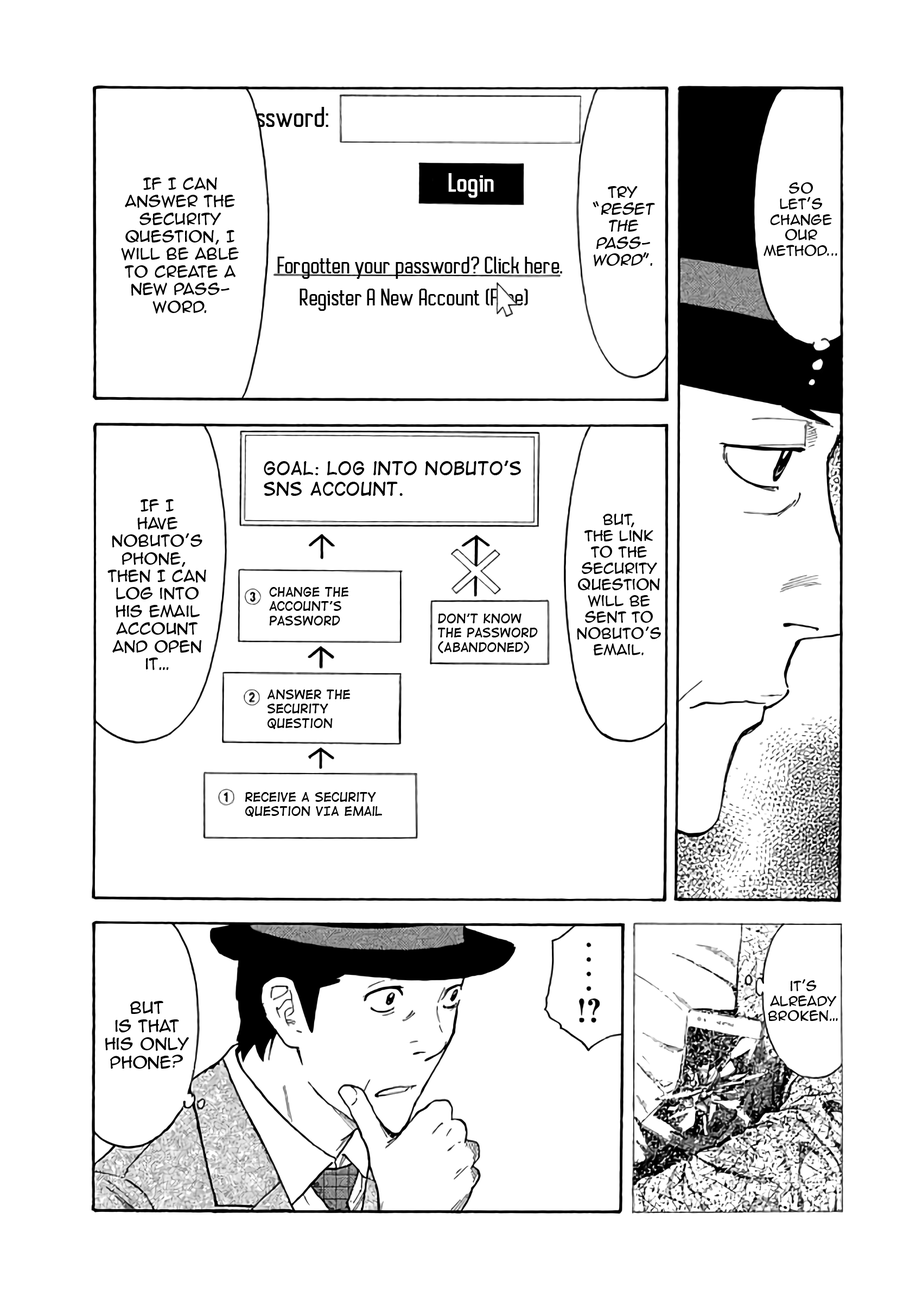
<style>
.page{position:relative;width:916px;height:1302px;background:#ffffff}
.page>*{position:absolute;margin:0}
.t1{font:26.6px "AutobusBold";color:#000000}
.t2{font:24.4px "AutobusBold";color:#fefefe;font-weight:bold}
.t3{font:14.6px "AnimeAce2.0BB";color:#000000}
.t4{font:13px "AnimeAce2.0BB";color:#000000}
.t5{font:14.1px "AnimeAce2.0BB";color:#000000;font-style:italic}
.t6{font:14.1px "AnimeAce2.0BB";color:#000000}
.t7{font:21.7px "AutobusBold";color:#000000}
.t8{font:17.4px "DigitalStrip";color:#000000}
.t9{font:13.6px "AnimeAce2.0BB";color:#000000}
.t10{font:11.9px "DigitalStrip";color:#000000}
.t11{font:12.5px "AnimeAce2.0BB";color:#000000}
.t12{font:15.2px "AnimeAce2.0BB";color:#000000}
</style>
<div class="page">
<p class="t1" style="left:234px;top:107px;width:94px;height:20px">Password:</p>
<p class="t2" style="left:448px;top:173px;width:46px;height:25px">Login</p>
<p class="t3" style="left:121px;top:177px;width:118px;height:137px;text-align:center">If I can<br>answer the <br>security <br>question, I will be able to create a new password.</p>
<p class="t4" style="left:763px;top:182px;width:74px;height:74px;text-align:center">So<br>Let’s<br>change<br>our<br>method...</p>
<p class="t5" style="left:592px;top:186px;width:63px;height:80px;text-align:center"><span class="t6">Try<br>“</span>Reset<br>the<br>pass-<br>word<span class="t6">”.</span></p>
<p class="t7" style="left:277px;top:257px;width:285px;height:22px">Forgotten your password? Click here.</p>
<p class="t7" style="left:299px;top:289px;width:229px;height:22px">Register A New Account (Free)</p>
<p class="t8" style="left:264px;top:461px;width:257px;height:35px">GOAL: Log into Nobuto’s<br>SNS Account.</p>
<p class="t3" style="left:107px;top:499px;width:99px;height:171px;text-align:center">If I<br>have<br>Nobuto’s<br>phone, <br>then I can<br>log into<br>his email<br>account<br>and open<br>it…</p>
<p class="t9" style="left:577px;top:514px;width:84px;height:141px;text-align:center">But,<br>the link<br>to the<br>security<br>question<br>will be<br>sent to<br>Nobuto’s<br>email.</p>
<p class="t10" style="left:269px;top:587px;width:80px;height:39px">change the<br>account’s<br>password</p>
<p class="t10" style="left:438px;top:614px;width:100px;height:39px">Don’t know<br>the password<br>(Abandoned)</p>
<p class="t10" style="left:267px;top:690px;width:83px;height:39px">Answer the<br>security<br>question</p>
<p class="t10" style="left:245px;top:792px;width:137px;height:25px">Receive A security<br>question VIA email</p>
<p class="t11" style="left:768px;top:979px;width:70px;height:43px;text-align:center">it’s<br>already<br>broken…</p>
<p class="t12" style="left:105px;top:1001px;width:84px;height:68px;text-align:center">But<br>is that<br>his only<br>phone?</p>
</div>
